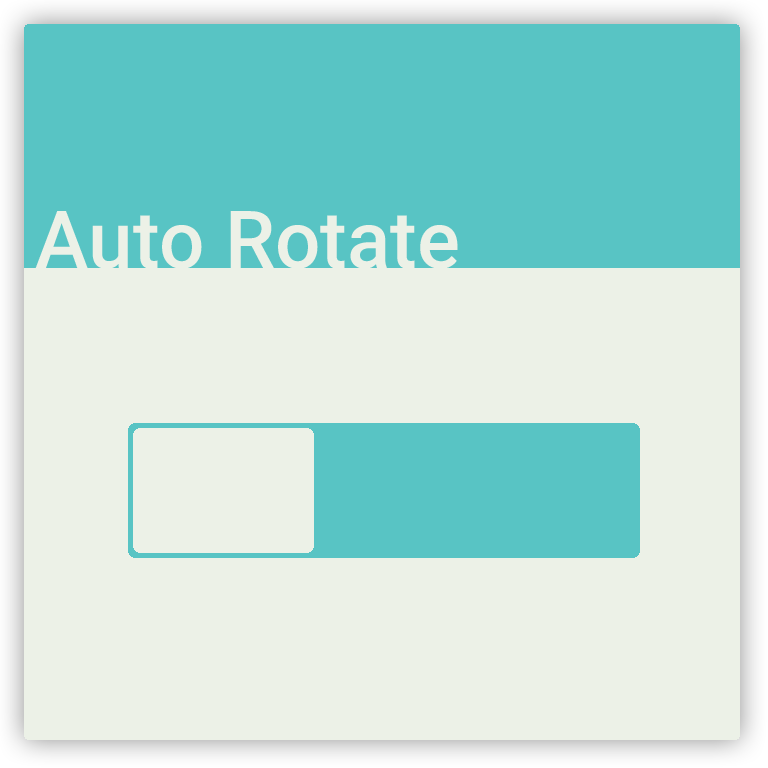
<style>
.page{position:relative;width:768px;height:768px;background:#ecf1e7}
.page>*{position:absolute;margin:0}
.t1{font:80px "Roboto-Medium";color:#ecf1e7}
</style>
<div class="page">
<p class="t1" style="left:35px;top:211px;width:423px;height:58px">Auto Rotate</p>
</div>
